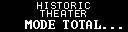
<style>
.page{position:relative;width:128px;height:32px;background:#000000}
.page>*{position:absolute;margin:0}
.t1{font:10px/8px "Terminal";letter-spacing:-0.05em;color:#ffffff}
.t2{font:12px "Terminal";letter-spacing:0.025em;color:#ffffff}
</style>
<div class="page">
<p class="t1" style="left:37px;top:2px;width:53px;height:15px;text-align:center">HISTORIC<br>THEATER</p>
<p class="t2" style="left:25px;top:20px;width:97px;height:9px">MODE TOTAL...</p>
</div>
